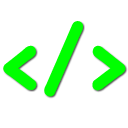
<style>
.page{position:relative;width:128px;height:128px;background:#ffffff}
.page>*{position:absolute;margin:0}
.t1{font:83.3px "Chalkboard-Bold";color:#00ff00}
</style>
<div class="page">
<p class="t1" style="left:3px;top:21px;width:123px;height:76px">&lt;/&gt;</p>
</div>
